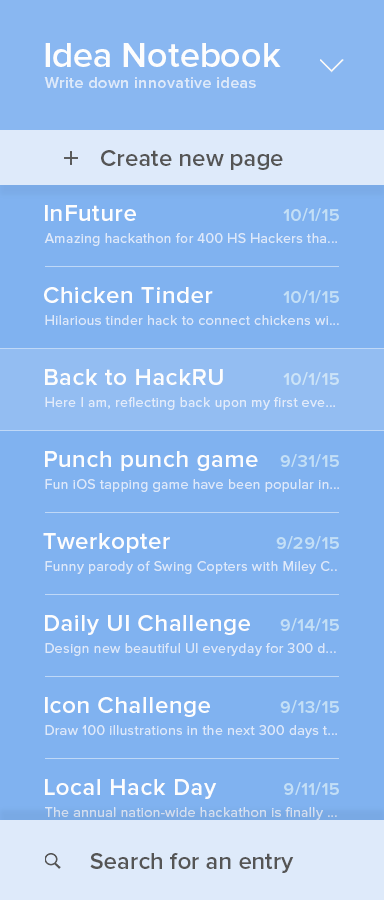
<style>
.page{position:relative;width:384px;height:900px;background:#80b2f0}
.page>*{position:absolute;margin:0}
.t1{font:36px "ProximaNova-Semibold";color:#fdfdfd}
.t2{font:16px "ProximaNova-Semibold";letter-spacing:0.025em;color:#deeaf9}
.t3{font:24px "ProximaNova-Semibold";color:#555555}
.t4{font:24px "ProximaNova-Semibold";letter-spacing:0.025em;color:#fdfdfd}
.t5{font:18px "ProximaNova-Semibold";letter-spacing:0.025em;color:#c3dff6}
.t6{font:14px "ProximaNova-Regular";letter-spacing:0.025em;color:#dde8f9}
.t7{font:14px "ProximaNova-Regular";letter-spacing:0.025em;color:#e2ebfa}
.t8{font:14px "ProximaNova-Regular";letter-spacing:0.025em;color:#d3dded}
</style>
<div class="page">
<p class="t1" style="left:45px;top:43px;width:236px;height:24px">Idea Notebook</p>
<p class="t2" style="left:44px;top:77px;width:212px;height:11px">Write down innovative ideas</p>
<p class="t3" style="left:101px;top:150px;width:182px;height:20px">Create new page</p>
<p class="t4" style="left:45px;top:205px;width:91px;height:16px">InFuture</p>
<p class="t5" style="left:283px;top:208px;width:56px;height:13px">10/1/15</p>
<p class="t6" style="left:44px;top:233px;width:293px;height:13px">Amazing hackathon for 400 HS Hackers tha...</p>
<p class="t4" style="left:44px;top:287px;width:169px;height:16px">Chicken Tinder</p>
<p class="t5" style="left:283px;top:290px;width:56px;height:13px">10/1/15</p>
<p class="t6" style="left:45px;top:315px;width:294px;height:10px">Hilarious tinder hack to connect chickens wi...</p>
<p class="t4" style="left:45px;top:369px;width:178px;height:16px">Back to HackRU</p>
<p class="t5" style="left:283px;top:372px;width:56px;height:13px">10/1/15</p>
<p class="t7" style="left:45px;top:397px;width:290px;height:13px">Here I am, reflecting back upon my first eve...</p>
<p class="t4" style="left:45px;top:451px;width:213px;height:20px">Punch punch game</p>
<p class="t5" style="left:280px;top:454px;width:59px;height:13px">9/31/15</p>
<p class="t6" style="left:45px;top:479px;width:294px;height:13px">Fun iOS tapping game have been popular in...</p>
<p class="t4" style="left:43px;top:533px;width:127px;height:20px">Twerkopter</p>
<p class="t5" style="left:276px;top:536px;width:63px;height:13px">9/29/15</p>
<p class="t6" style="left:45px;top:561px;width:292px;height:13px">Funny parody of Swing Copters with Miley C..</p>
<p class="t4" style="left:45px;top:615px;width:205px;height:20px">Daily UI Challenge</p>
<p class="t5" style="left:280px;top:618px;width:59px;height:13px">9/14/15</p>
<p class="t6" style="left:45px;top:643px;width:291px;height:13px">Design new beautiful UI everyday for 300 d...</p>
<p class="t4" style="left:45px;top:697px;width:165px;height:20px">Icon Challenge</p>
<p class="t5" style="left:280px;top:700px;width:59px;height:13px">9/13/15</p>
<p class="t6" style="left:45px;top:725px;width:292px;height:13px">Draw 100 illustrations in the next 300 days t...</p>
<p class="t4" style="left:45px;top:779px;width:172px;height:20px">Local Hack Day</p>
<p class="t5" style="left:284px;top:782px;width:55px;height:13px">9/11/15</p>
<p class="t8" style="left:45px;top:807px;width:292px;height:13px">The annual nation-wide hackathon is finally ...</p>
<p class="t3" style="left:90px;top:853px;width:204px;height:20px">Search for an entry</p>
</div>
